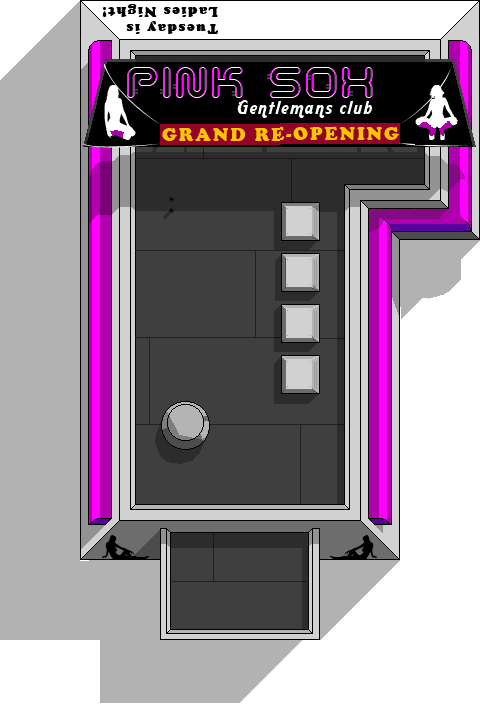
<style>
.page{position:relative;width:480px;height:720px;background:#ffffff}
.page>*{position:absolute;margin:0}
.t1{font:14px "CupertinoPlain";letter-spacing:0.1em;color:#000000}
.t2{font:36px "SciFiedOutline";letter-spacing:0.1em}
.t3{font:18px "AardvarkCafe";letter-spacing:0.1em;color:#ffffff}
</style>
<div class="page">
<p class="t1" style="left:102px;top:4px;width:116px;height:30px;rotate:180deg">Tuesday is<br>Ladies Night!</p>
<p class="t2" style="left:127px;top:67px;width:246px;height:31px">PINK SOX</p>
<p class="t2" style="left:127px;top:66px;width:246px;height:31px">PINK SOX</p>
<p class="t3" style="left:237px;top:100px;width:135px;height:18px">Gentlemans club</p>
</div>
